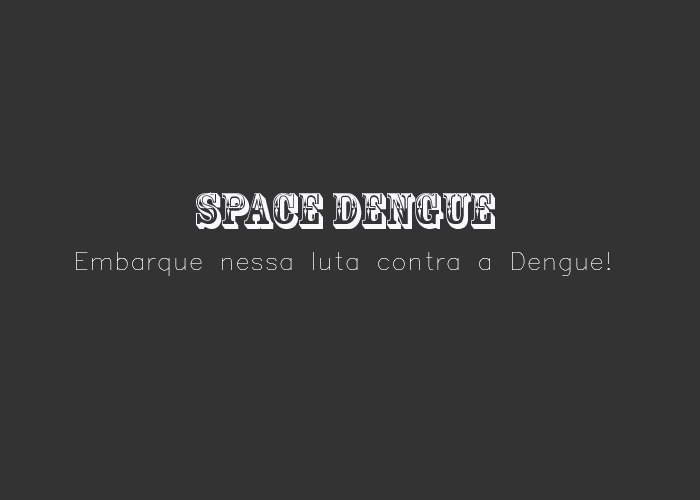
<style>
.page{position:relative;width:700px;height:500px;background:#333333}
.page>*{position:absolute;margin:0}
.t1{font:24px "Simplex";color:#f9f9fc}
.t2{font:48px "RosewoodStd-Regular";color:#f9f9fc}
</style>
<div class="page">
<p class="t1" style="left:76px;top:192px;width:534px;height:84px;text-align:center"><span class="t2">Space Dengue<br><br></span>Embarque nessa luta contra a Dengue!</p>
</div>
